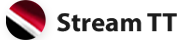
<style>
.page{position:relative;width:183px;height:40px;background:#ffffff}
.page>*{position:absolute;margin:0}
.t1{font:26.6px "MyriadPro-Bold";color:#1b1b1b}
</style>
<div class="page">
<p class="t1" style="left:57px;top:13px;width:120px;height:19px">Stream TT</p>
</div>
